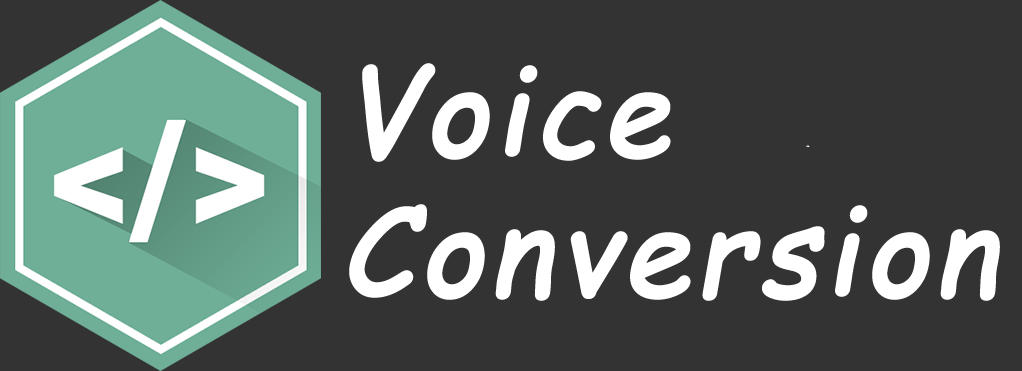
<style>
.page{position:relative;width:1022px;height:371px;background:#333333}
.page>*{position:absolute;margin:0}
.t1{font:120px/20px "ComicSansMS";letter-spacing:0.025em;color:#ffffff;font-weight:bold;font-style:italic}
</style>
<div class="page">
<p class="t1" style="left:349px;top:63px;width:651px;height:238px">Voice<br><br><br><br><br><br><br>Conversion</p>
</div>
